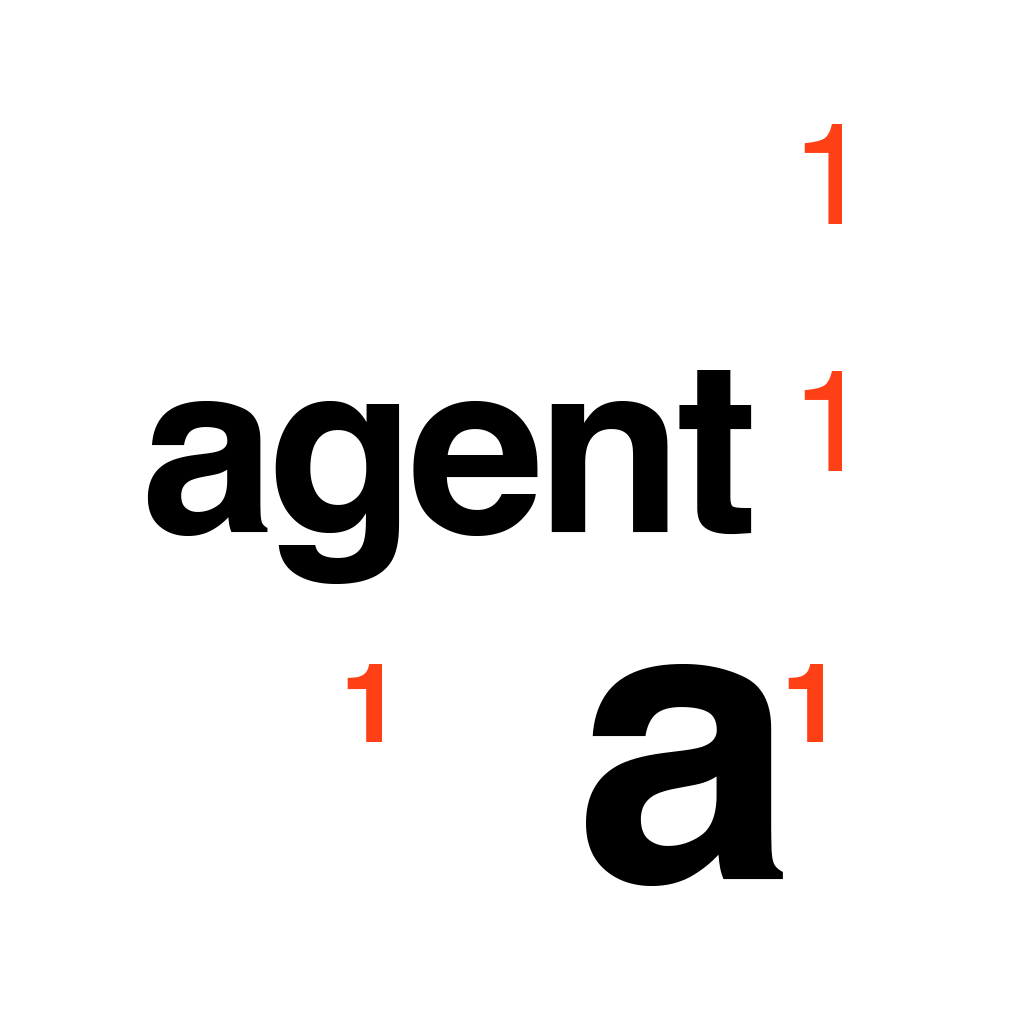
<style>
.page{position:relative;width:1024px;height:1024px;background:#ffffff}
.page>*{position:absolute;margin:0}
.t1{font:143.9px "Helvetica";letter-spacing:-0.01em;color:#ff4017}
.t2{font:239.9px "Helvetica-Bold";letter-spacing:-0.025em;color:#000000}
.t3{font:110.6px "Helvetica-Bold";letter-spacing:-0.025em;color:#ff4017}
.t4{font:393.5px "Helvetica-Bold";letter-spacing:-0.025em;color:#000000}
</style>
<div class="page">
<p class="t1" style="left:804px;top:124px;width:38px;height:100px">1</p>
<p class="t2" style="left:147px;top:370px;width:605px;height:214px">agent</p>
<p class="t1" style="left:804px;top:371px;width:38px;height:100px">1</p>
<p class="t3" style="left:347px;top:664px;width:35px;height:78px">1</p>
<p class="t4" style="left:586px;top:664px;width:197px;height:222px">a</p>
<p class="t3" style="left:788px;top:664px;width:35px;height:78px">1</p>
</div>
